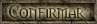
<style>
.page{position:relative;width:97px;height:24px}
.page>*{position:absolute;margin:0}
.t1{font:17.1px "Morpheus"}
</style>
<div class="page">
<p class="t1" style="left:9px;top:5px;width:80px;height:16px">Confirmar</p>
</div>
